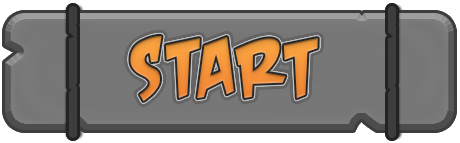
<style>
.page{position:relative;width:460px;height:143px}
.page>*{position:absolute;margin:0}
.t1{font:113.5px "CrashLandingBB";letter-spacing:0.04em;color:#f1943b}
.t2{font:113.5px "CrashLandingBB";letter-spacing:0.04em}
</style>
<div class="page">
<p class="t1" style="left:130px;top:36px;width:188px;height:65px">start</p>
<p class="t2" style="left:130px;top:43px;width:188px;height:65px">start</p>
</div>
